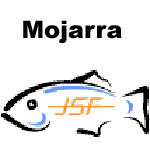
<style>
.page{position:relative;width:150px;height:150px;background:#ffffff}
.page>*{position:absolute;margin:0}
.t1{font:24px "Arial-Black";color:#000000}
</style>
<div class="page">
<p class="t1" style="left:23px;top:20px;width:99px;height:23px">Mojarra</p>
</div>
